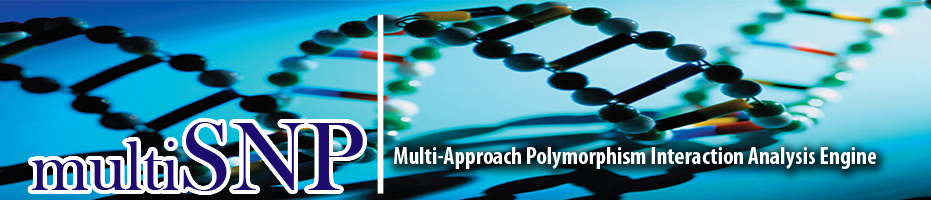
<style>
.page{position:relative;width:931px;height:200px}
.page>*{position:absolute;margin:0}
.t1{font:72px "BaskOldFace";color:#1d0b70}
.t2{font:100px "BaskOldFace";color:#1d0b70}
.t3{font:24px "MyriadPro-BoldCond";color:#ffffff}
</style>
<div class="page">
<p class="t1" style="left:31px;top:122px;width:332px;height:69px">multi<span class="t2">SNP</span></p>
<p class="t3" style="left:394px;top:147px;width:482px;height:22px">Multi-Approach Polymorphism Interaction Analysis Engine</p>
</div>
